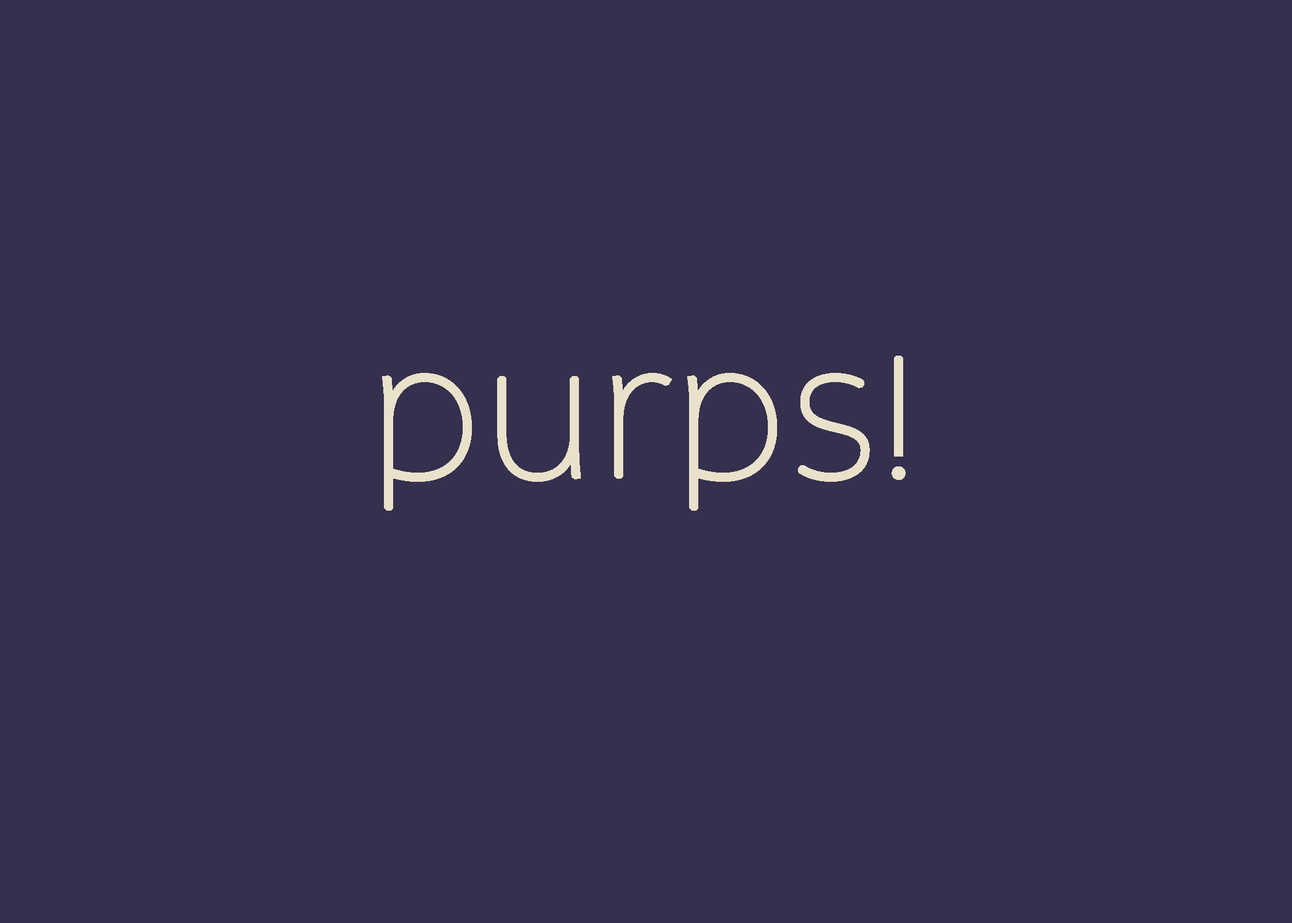
<style>
.page{position:relative;width:1292px;height:923px;background:#35304d}
.page>*{position:absolute;margin:0}
.t1{font:184.6px "AubaineUltraLight-Regular";color:#e9e1ca;font-weight:bold}
</style>
<div class="page">
<p class="t1" style="left:382px;top:356px;width:524px;height:155px">purps!</p>
</div>
